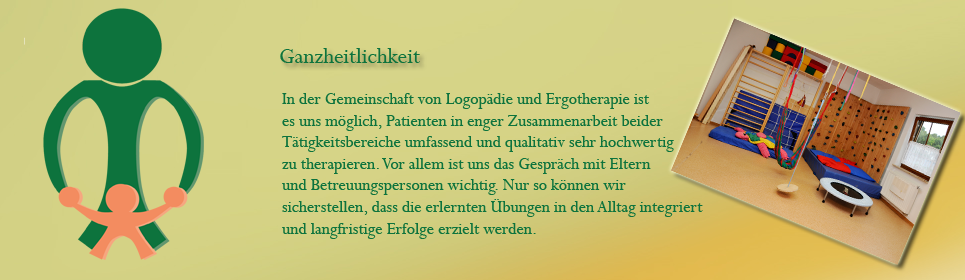
<style>
.page{position:relative;width:965px;height:280px}
.page>*{position:absolute;margin:0}
.t1{font:24px "Perpetua";color:#0d733d}
.t2{font:18px "Perpetua";color:#0d733d}
</style>
<div class="page">
<p class="t1" style="left:280px;top:48px;width:140px;height:15px">Ganzheitlichkeit</p>
<p class="t2" style="left:282px;top:93px;width:421px;height:146px">In der Gemeinschaft von Logopädie und Ergotherapie ist <br>es uns möglich, Patienten in enger Zusammenarbeit beider <br>Tätigkeitsbereiche umfassend und qualitativ sehr hochwertig<br>zu therapieren. Vor allem ist uns das Gespräch mit Eltern <br>und Betreuungspersonen wichtig. Nur so können wir <br>sicherstellen, dass die erlernten Übungen in den Alltag integriert <br>und langfristige Erfolge erzielt werden.</p>
</div>
